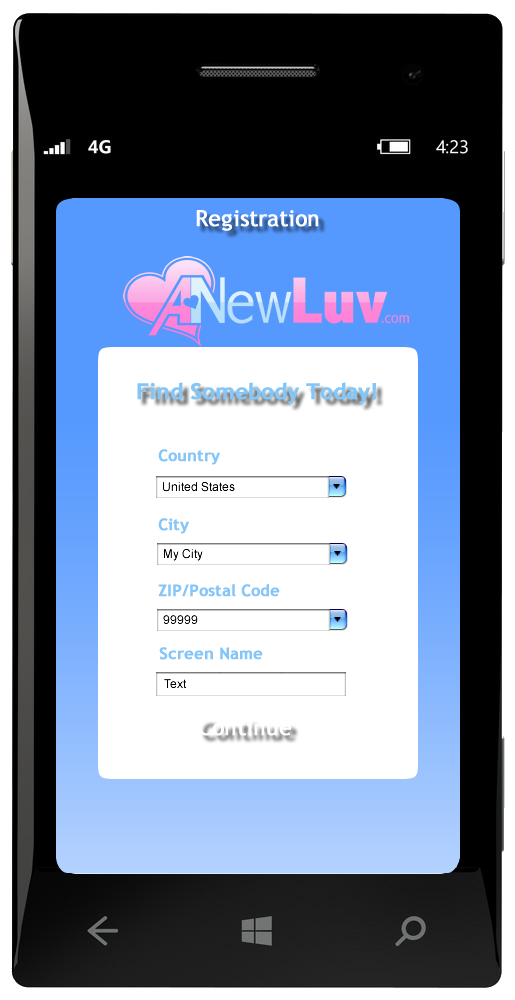
<style>
.page{position:relative;width:515px;height:1000px;background:#ffffff}
.page>*{position:absolute;margin:0}
.t1{font:22px "TrebuchetMS";color:#ffffff;font-weight:bold}
.t2{font:22px "TrebuchetMS-Bold";color:#85c6f8;font-weight:bold}
.t3{font:16px "TrebuchetMS-Bold";color:#85c5f8;font-weight:bold}
</style>
<div class="page">
<p class="t1" style="left:196px;top:210px;width:123px;height:21px">Registration</p>
<p class="t2" style="left:137px;top:382px;width:240px;height:22px">Find Somebody Today!</p>
<p class="t3" style="left:158px;top:449px;width:62px;height:16px">Country</p>
<p class="t3" style="left:158px;top:518px;width:31px;height:16px">City</p>
<p class="t3" style="left:158px;top:584px;width:122px;height:13px">ZIP/Postal Code</p>
<p class="t3" style="left:159px;top:647px;width:104px;height:13px">Screen Name</p>
<p class="t1" style="left:198px;top:719px;width:94px;height:17px">Continue</p>
</div>
